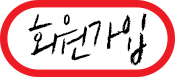
<style>
.page{position:relative;width:175px;height:77px;background:#ffffff}
.page>*{position:absolute;margin:0}
.t1{font:55.1px "SDGongPil-aMd";letter-spacing:-0.06em;color:#000000}
</style>
<div class="page">
<p class="t1" style="left:28px;top:13px;width:119px;height:53px">회원가입</p>
</div>
